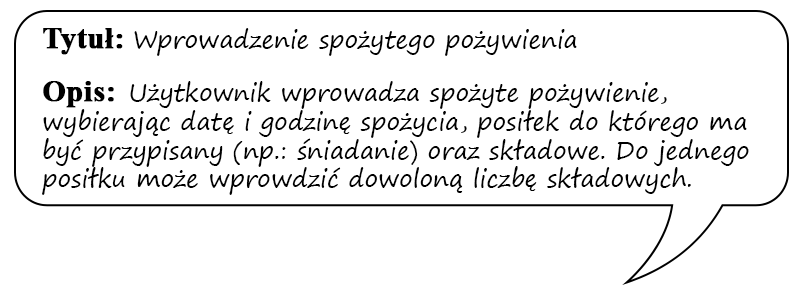
<style>
.page{position:relative;width:800px;height:299px;background:#ffffff}
.page>*{position:absolute;margin:0}
.t1{font:24px "SegoePrint";color:#000000}
.t2{font:30px "TimesNewRomanPS-BoldMT";color:#000000;font-weight:bold}
</style>
<div class="page">
<p class="t1" style="left:42px;top:28px;width:707px;height:167px"><span class="t2">Tytuł: </span>Wprowadzenie spożytego pożywienia<br><br><span class="t2">Opis:  </span>Użytkownik wprowadza spożyte pożywienie, wybierając datę i godzinę spożycia, posiłek do którego ma być przypisany (np.: śniadanie) oraz składowe. Do jednego posiłku może wprowdzić dowoloną liczbę składowych.</p>
</div>
